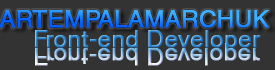
<style>
.page{position:relative;width:275px;height:70px;background:#333333}
.page>*{position:absolute;margin:0}
.t1{font:24px "HelveticaCE-Regular";font-weight:bold}
.t2{font:24.3px "HelveticaCE-Regular";font-weight:bold}
</style>
<div class="page">
<p class="t1" style="left:0px;top:10px;width:269px;height:18px">ARTEMPALAMARCHUK</p>
<p class="t1" style="left:35px;top:30px;width:226px;height:23px">Front-end Developer</p>
<p class="t2" style="left:35px;top:43px;width:225px;height:23px">Front-end Developer</p>
</div>
